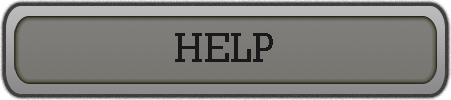
<style>
.page{position:relative;width:451px;height:100px}
.page>*{position:absolute;margin:0}
.t1{font:41.7px "Rockwell";color:#171717}
</style>
<div class="page">
<p class="t1" style="left:175px;top:33px;width:98px;height:29px">HELP</p>
</div>
